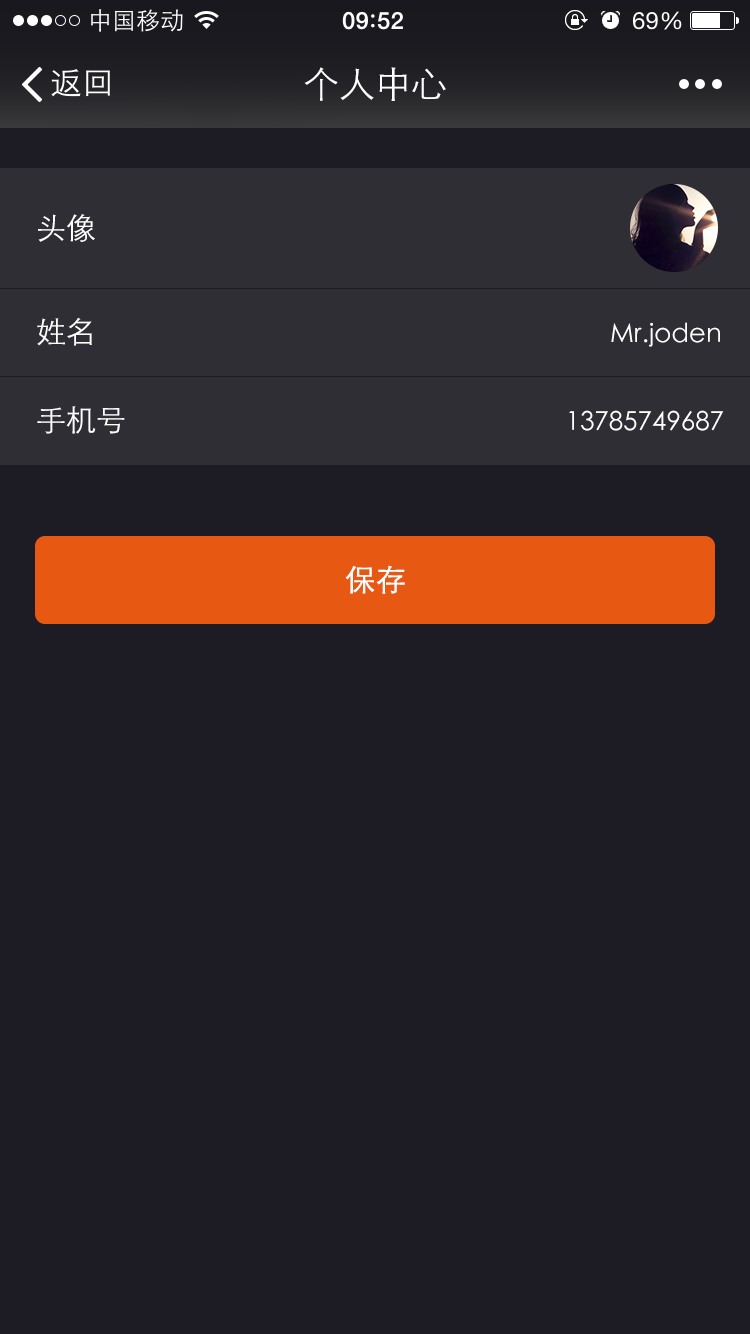
<style>
.page{position:relative;width:750px;height:1334px;background:#1d1c24}
.page>*{position:absolute;margin:0}
.t1{font:36px "STXihei";color:#ffffff}
.t2{font:30px "STXihei";color:#ffffff}
.t3{font:26px "STXihei";color:#ffffff}
.t4{font:30px "STXihei";color:#ffffff;font-weight:bold}
</style>
<div class="page">
<p class="t1" style="left:304px;top:67px;width:142px;height:34px">个人中心</p>
<p class="t2" style="left:38px;top:214px;width:57px;height:28px">头像</p>
<p class="t2" style="left:37px;top:317px;width:55px;height:29px">姓名</p>
<p class="t3" style="left:611px;top:322px;width:109px;height:25px">Mr.joden</p>
<p class="t2" style="left:37px;top:406px;width:88px;height:28px">手机号</p>
<p class="t3" style="left:569px;top:410px;width:155px;height:21px">13785749687</p>
<p class="t4" style="left:345px;top:565px;width:60px;height:29px">保存</p>
</div>
